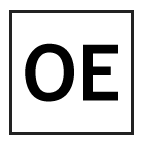
<style>
.page{position:relative;width:144px;height:144px;background:#ffffff}
.page>*{position:absolute;margin:0}
.t1{font:78px "TrebuchetMS-Bold";color:#000000}
</style>
<div class="page">
<p class="t1" style="left:25px;top:43px;width:93px;height:59px">OE</p>
</div>
